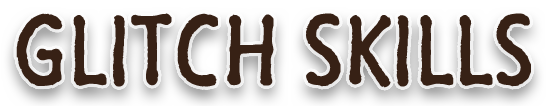
<style>
.page{position:relative;width:555px;height:106px;background:#372115}
.page>*{position:absolute;margin:0}
.t1{font:100px "SegoeMarker";color:#382115}
</style>
<div class="page">
<p class="t1" style="left:16px;top:13px;width:515px;height:75px">GLITCH SKILLS</p>
</div>
